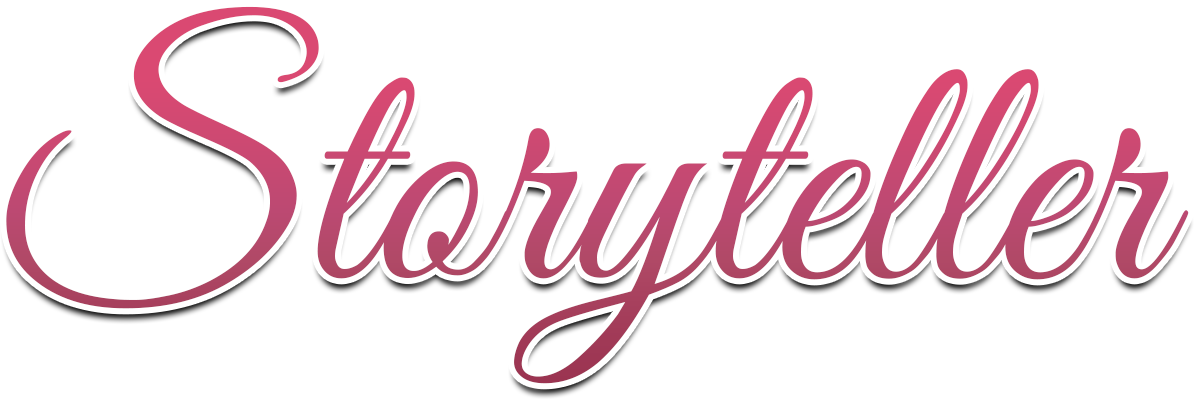
<style>
.page{position:relative;width:1195px;height:400px;background:#ffffff}
.page>*{position:absolute;margin:0}
.t1{font:333.3px "GreatVibes-Regular";color:#be4972}
</style>
<div class="page">
<p class="t1" style="left:6px;top:6px;width:1183px;height:378px">Storyteller</p>
</div>
